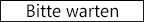
<style>
.page{position:relative;width:144px;height:22px;background:#ffffff}
.page>*{position:absolute;margin:0}
.t1{font:18px "SegoeUI";color:#000000}
</style>
<div class="page">
<p class="t1" style="left:27px;top:3px;width:91px;height:15px">Bitte warten</p>
</div>
